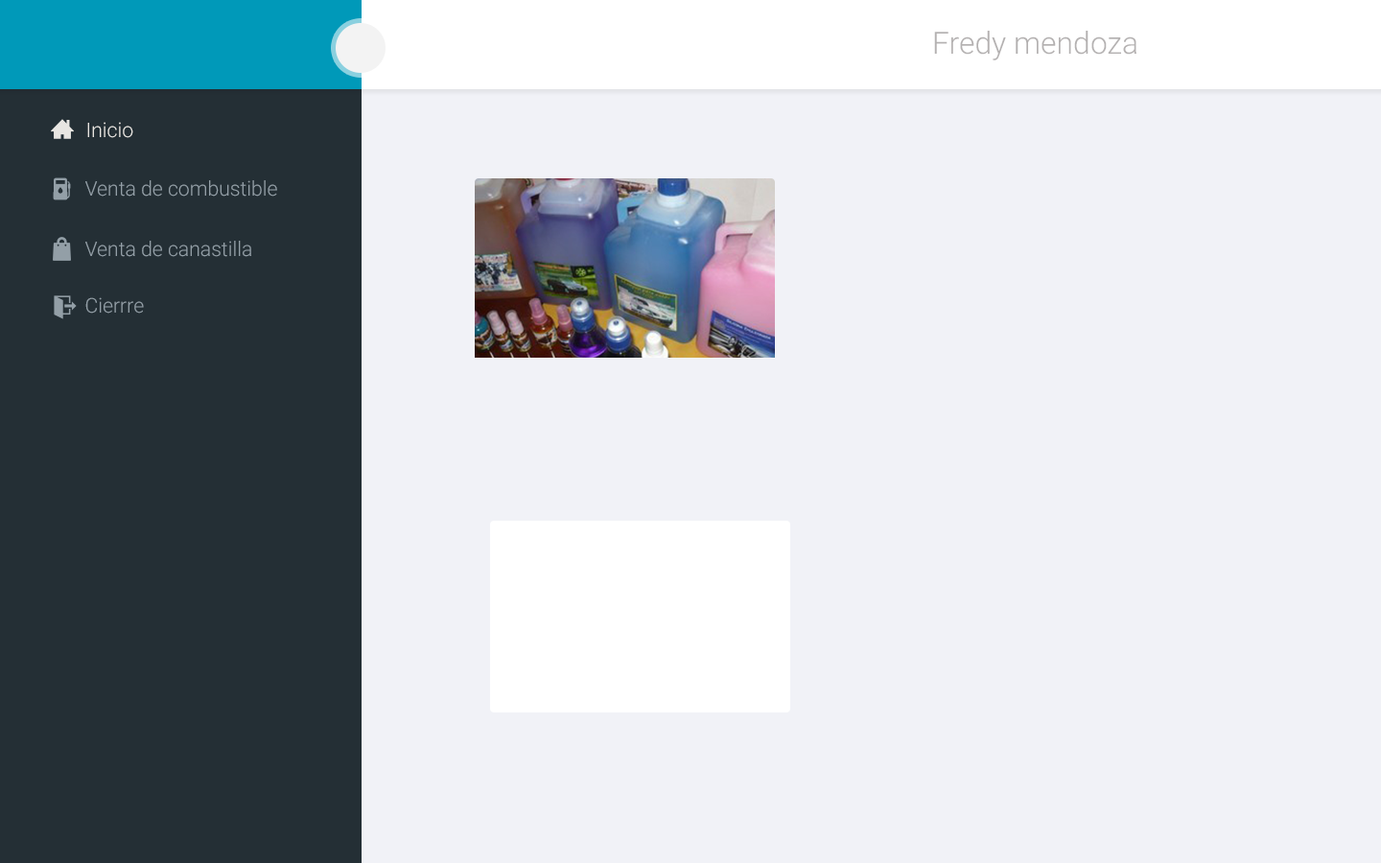
<style>
.page{position:relative;width:1381px;height:863px;background:#f1f2f7}
.page>*{position:absolute;margin:0}
.t1{font:30.7px "Roboto-Light";color:#b4b1b1}
.t2{font:20.3px "Roboto-Light";color:#e8e6e2}
.t3{font:20.3px "Roboto-Light";color:#939fa7}
</style>
<div class="page">
<p class="t1" style="left:934px;top:31px;width:203px;height:29px">Fredy mendoza</p>
<p class="t2" style="left:87px;top:122px;width:46px;height:16px">Inicio</p>
<p class="t3" style="left:85px;top:180px;width:192px;height:17px">Venta de combustible</p>
<p class="t3" style="left:85px;top:241px;width:166px;height:16px">Venta de canastilla</p>
<p class="t3" style="left:85px;top:297px;width:59px;height:17px">Cierrre</p>
</div>
